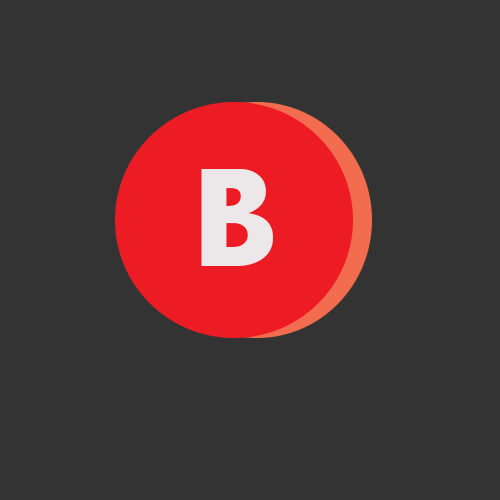
<style>
.page{position:relative;width:500px;height:500px;background:#333333}
.page>*{position:absolute;margin:0}
.t1{font:142.2px "AbadiMT-CondensedExtraBold";letter-spacing:0.038em;color:#ece7e8;scale:1.09 1}
</style>
<div class="page">
<p class="t1" style="left:201px;top:169px;width:72px;height:97px">B</p>
</div>
